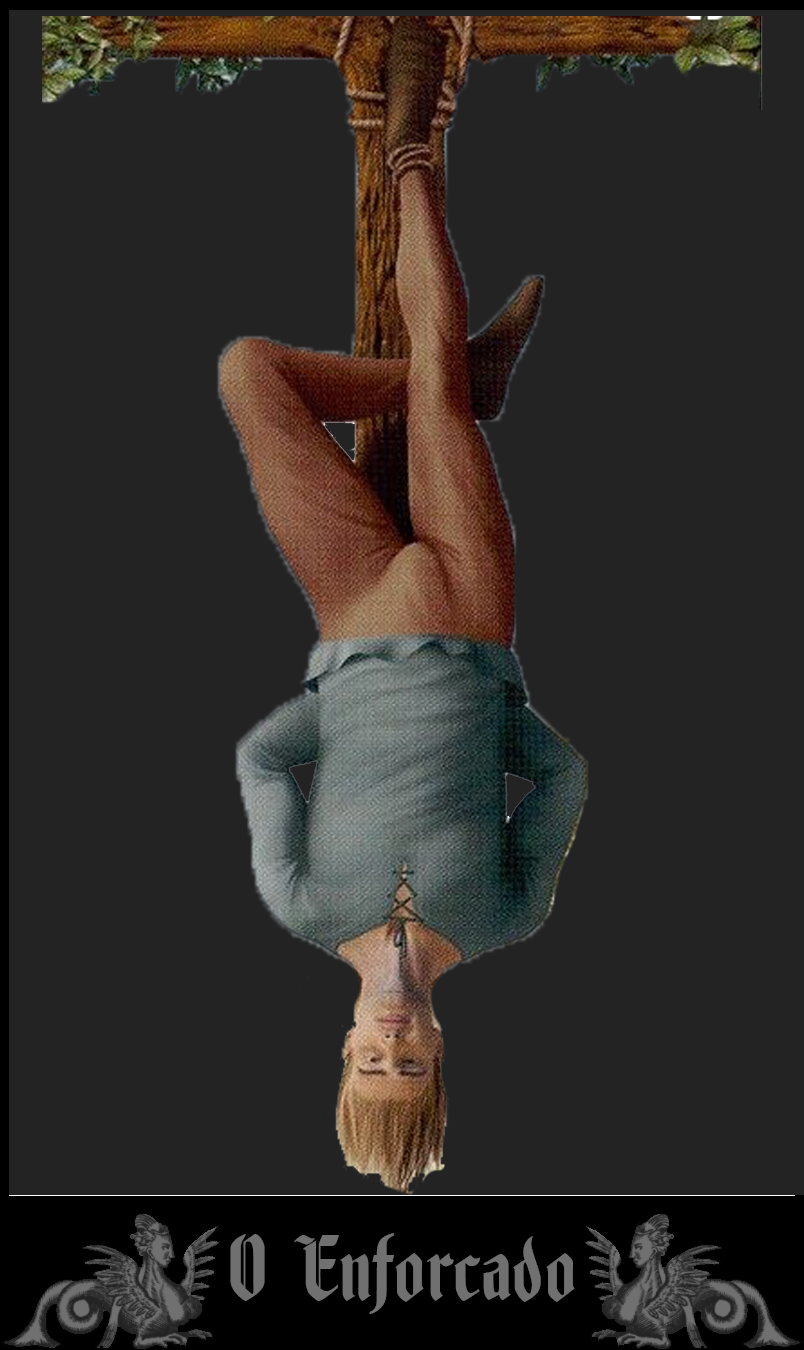
<style>
.page{position:relative;width:804px;height:1350px;background:#232323}
.page>*{position:absolute;margin:0}
.t1{font:95.6px "FenwickWoodtype";color:#707070}
</style>
<div class="page">
<p class="t1" style="left:230px;top:1233px;width:345px;height:81px">O Enforcado</p>
</div>
